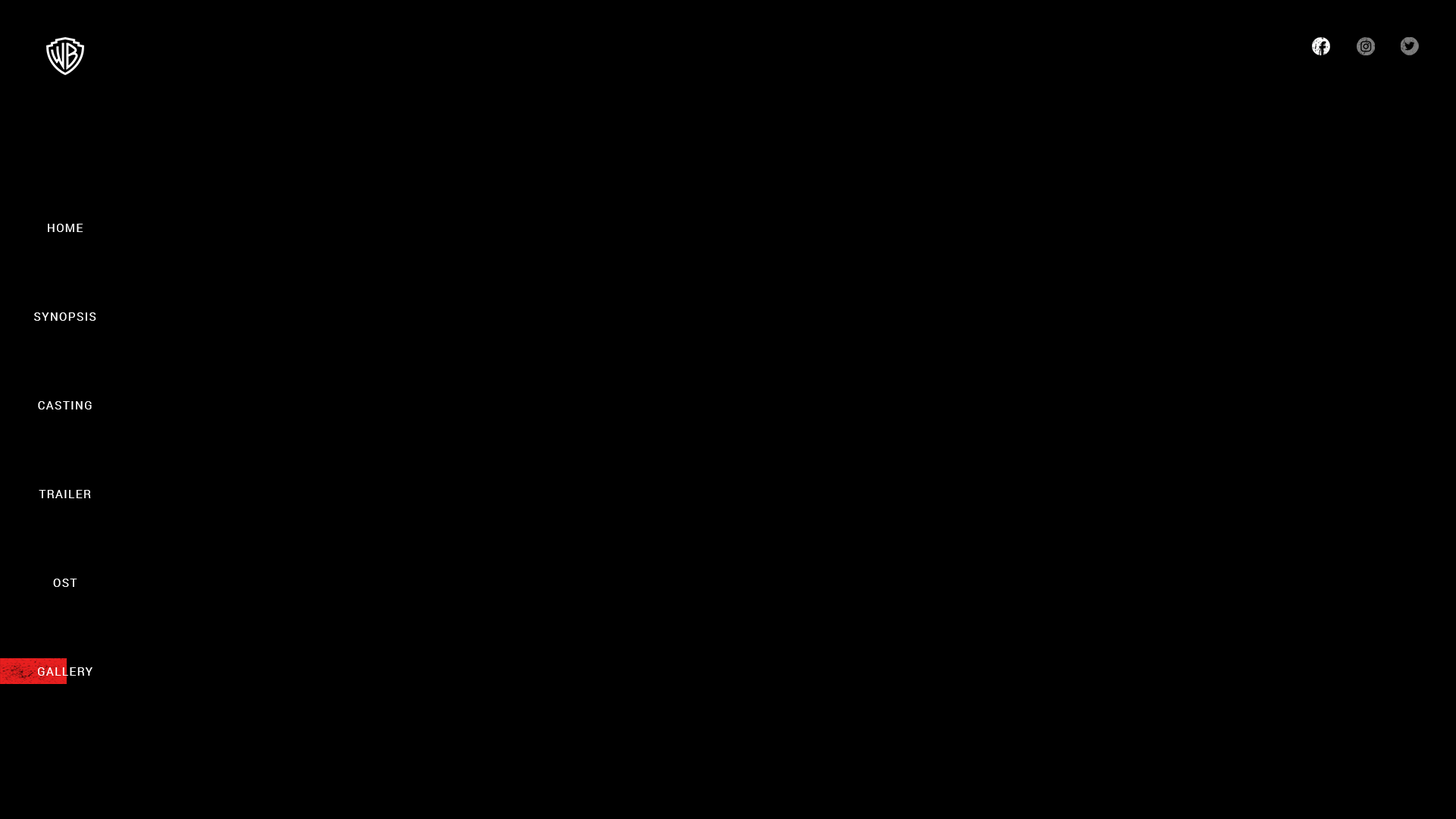
<style>
.page{position:relative;width:1456px;height:819px;background:#000000}
.page>*{position:absolute;margin:0}
.t1{font:11.4px "Roboto-Regular";letter-spacing:0.1em;color:#ffffff}
</style>
<div class="page">
<p class="t1" style="left:48px;top:224px;width:35px;height:8px">HOME</p>
<p class="t1" style="left:34px;top:312px;width:62px;height:9px">SYNOPSIS</p>
<p class="t1" style="left:38px;top:401px;width:54px;height:8px">CASTING</p>
<p class="t1" style="left:39px;top:490px;width:52px;height:8px">TRAILER</p>
<p class="t1" style="left:53px;top:579px;width:24px;height:8px">OST</p>
<p class="t1" style="left:38px;top:667px;width:55px;height:9px">GALLERY</p>
</div>
